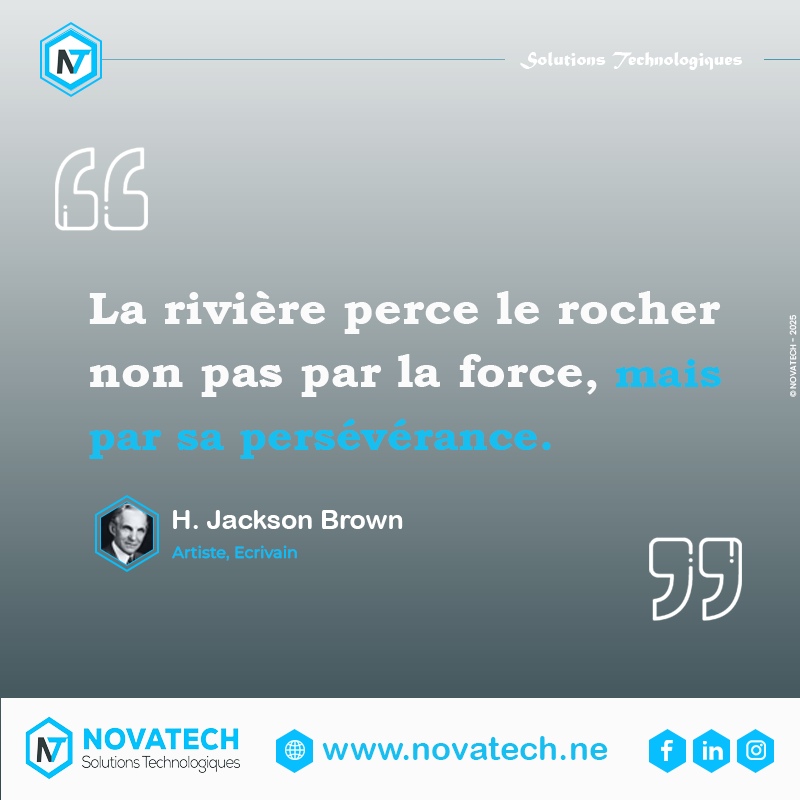
<style>
.page{position:relative;width:800px;height:800px}
.page>*{position:absolute;margin:0}
.t1{font:19.7px "MaturaMTScriptCapitals";color:#ffffff}
.t2{font:45.8px/62.9px "BookmanOldStyle-Bold";color:#fbfbfb;scale:1.05 1}
.t3{font:41.7px/62.9px "BookmanOldStyle-Bold";color:#fbfbfb;scale:1.05 1}
.t4{font:41.7px/62.9px "BookmanOldStyle-Bold";color:#16bff0;scale:1.05 1}
.t5{font:8.3px "Poppins-Regular";color:#ffffff}
.t6{font:26.7px "ArialRoundedMTBold";color:#ffffff}
.t7{font:16px "MontserratRoman-Medium";color:#08bffc}
.t8{font:33.3px "ArialRoundedMTBold";color:#16bff0}
</style>
<div class="page">
<p class="t1" style="left:520px;top:52px;width:222px;height:18px">Solutions Technologiques</p>
<p class="t2" style="left:89px;top:291px;width:632px;height:168px">La rivière perce le rocher <br>non pas par la force<span class="t3">, </span><span class="t4">mais<br>par sa persévérance.</span></p>
<p class="t5" style="left:789px;top:315px;width:8px;height:82px;rotate:-90deg">© NOVATECH - 2025</p>
<p class="t6" style="left:173px;top:510px;width:230px;height:19px">H. Jackson Brown</p>
<p class="t7" style="left:172px;top:545px;width:125px;height:16px">Artiste, Ecrivain</p>
<p class="t8" style="left:322px;top:736px;width:286px;height:24px">www.novatech.ne</p>
</div>
